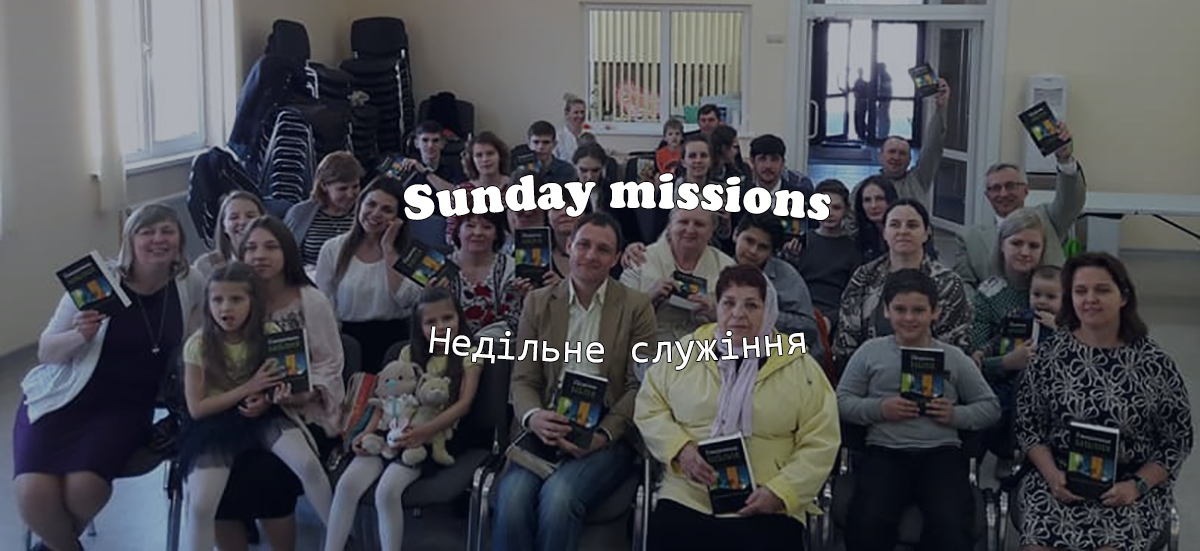
<style>
.page{position:relative;width:1200px;height:551px}
.page>*{position:absolute;margin:0}
.t1{font:50px "CooperBlack";color:#ffffff}
.t2{font:40px "Consolas";color:#ffffff}
</style>
<div class="page">
<p class="t1" style="left:404px;top:173px;width:427px;height:47px">Sunday missions</p>
<p class="t2" style="left:429px;top:326px;width:377px;height:44px">Недільне служіння</p>
</div>
